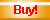
<style>
.page{position:relative;width:50px;height:20px}
.page>*{position:absolute;margin:0}
.t1{font:12px "Arial-BoldMT";color:#ff0000}
</style>
<div class="page">
<p class="t1" style="left:14px;top:5px;width:23px;height:11px">Buy!</p>
</div>
